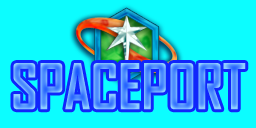
<style>
.page{position:relative;width:256px;height:128px;background:#0cfdff}
.page>*{position:absolute;margin:0}
.t1{font:60.4px "AgencyFB-Bold"}
</style>
<div class="page">
<p class="t1" style="left:13px;top:63px;width:233px;height:47px">SPACEPORT</p>
</div>
